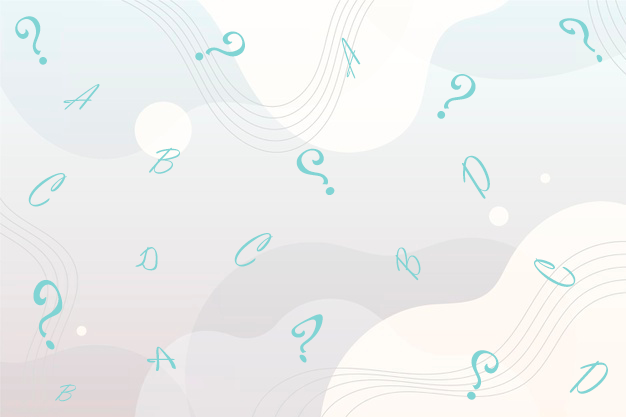
<style>
.page{position:relative;width:626px;height:417px}
.page>*{position:absolute;margin:0}
.t1{font:72px "Harrington";color:#80d4d4}
.t2{font:60px "Harrington";color:#80d4d4}
.t3{font:36px "VladimirScript";color:#80d4d4}
.t4{font:71.8px "Harrington";color:#80d4d4;scale:1.12 1}
.t5{font:48px "VladimirScript";color:#80d4d4}
.t6{font:30px "VladimirScript";color:#80d4d4}
.t7{font:48px "Harrington";color:#80d4d4}
.t8{font:24px "VladimirScript";color:#80d4d4}
</style>
<div class="page">
<p class="t1" style="left:15px;top:16px;width:32px;height:49px;rotate:-29deg">?</p>
<p class="t2" style="left:559px;top:18px;width:44px;height:45px">?</p>
<p class="t1" style="left:195px;top:31px;width:50px;height:30px;rotate:66deg">?</p>
<p class="t3" style="left:341px;top:37px;width:20px;height:42px;rotate:-71deg">A</p>
<p class="t1" style="left:437px;top:74px;width:39px;height:45px;rotate:33deg">?</p>
<p class="t3" style="left:63px;top:84px;width:37px;height:26px">A</p>
<p class="t3" style="left:149px;top:147px;width:31px;height:27px">B</p>
<p class="t4" style="left:296px;top:148px;width:39px;height:47px;rotate:151deg">?</p>
<p class="t5" style="left:462px;top:155px;width:28px;height:44px;rotate:-75deg">D</p>
<p class="t5" style="left:28px;top:173px;width:39px;height:34px">C</p>
<p class="t5" style="left:234px;top:233px;width:39px;height:34px">C</p>
<p class="t6" style="left:135px;top:246px;width:23px;height:25px">D</p>
<p class="t3" style="left:395px;top:247px;width:26px;height:34px;rotate:-84deg">B</p>
<p class="t5" style="left:534px;top:258px;width:42px;height:29px;rotate:-110deg">C</p>
<p class="t7" style="left:33px;top:280px;width:30px;height:70px">?</p>
<p class="t1" style="left:291px;top:314px;width:32px;height:49px">?</p>
<p class="t3" style="left:147px;top:346px;width:29px;height:25px">A</p>
<p class="t4" style="left:467px;top:350px;width:32px;height:50px;rotate:-153deg">?</p>
<p class="t5" style="left:569px;top:360px;width:39px;height:34px">D</p>
<p class="t8" style="left:55px;top:384px;width:21px;height:18px">B</p>
</div>
